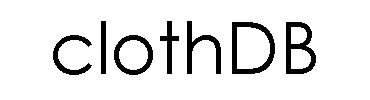
<style>
.page{position:relative;width:370px;height:100px;background:#ffffff}
.page>*{position:absolute;margin:0}
.t1{font:72px "CenturyGothic";color:#000000}
</style>
<div class="page">
<p class="t1" style="left:53px;top:21px;width:263px;height:54px">clothDB</p>
</div>
